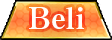
<style>
.page{position:relative;width:112px;height:40px}
.page>*{position:absolute;margin:0}
.t1{font:30px "RyuminPro-ExBold";color:#fffffa}
</style>
<div class="page">
<p class="t1" style="left:29px;top:7px;width:55px;height:22px">Beli</p>
</div>
